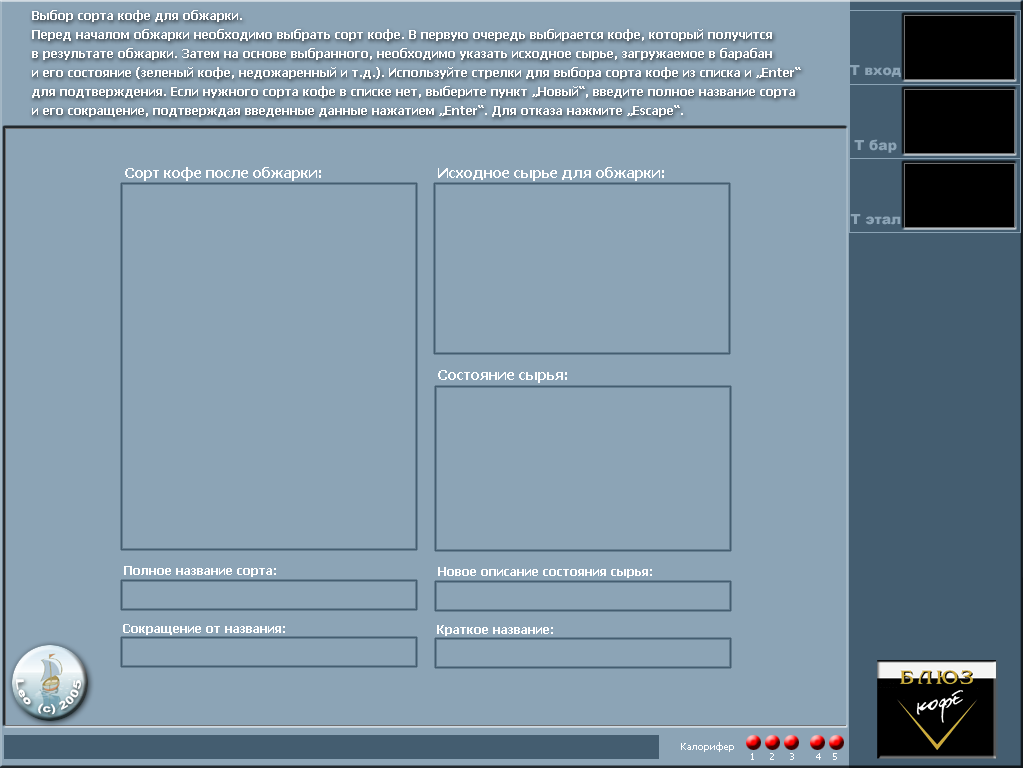
<style>
.page{position:relative;width:1023px;height:768px;background:#8ca4b6}
.page>*{position:absolute;margin:0}
.t1{font:12px/19px "Tahoma-Bold";color:#ffffff}
.t2{font:14px "Tahoma-Bold";color:#ffffff}
.t3{font:12px "Tahoma-Bold";color:#ffffff}
</style>
<div class="page">
<p class="t1" style="left:32px;top:10px;width:769px;height:107px">Выбор сорта кофе для обжарки.<br>Перед началом обжарки необходимо выбрать сорт кофе. В первую очередь выбирается кофе, который получится <br>в результате обжарки. Затем на основе выбранного, необходимо указать исходное сырье, загружаемое в барабан <br>и его состояние (зеленый кофе, недожаренный и т.д.). Используйте стрелки для выбора сорта кофе из списка и „Enter“ <br>для подтверждения. Если нужного сорта кофе в списке нет, выберите пункт „Новый“, введите полное название сорта<br>и его сокращение, подтверждая введенные данные нажатием „Enter“. Для отказа нажмите „Escape“.</p>
<p class="t2" style="left:125px;top:167px;width:196px;height:14px">Сорт кофе после обжарки:</p>
<p class="t2" style="left:438px;top:167px;width:226px;height:14px">Исходное сырье для обжарки:</p>
<p class="t2" style="left:438px;top:370px;width:129px;height:13px">Состояние сырья:</p>
<p class="t3" style="left:438px;top:567px;width:214px;height:11px">Новое описание состояния сырья:</p>
</div>
